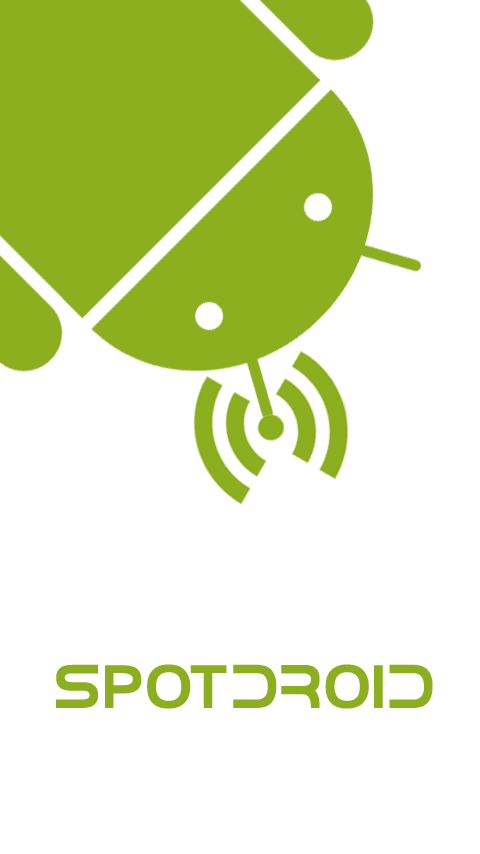
<style>
.page{position:relative;width:480px;height:854px;background:#ffffff}
.page>*{position:absolute;margin:0}
.t1{font:60px "DroidLogo";color:#8caf20}
</style>
<div class="page">
<p class="t1" style="left:56px;top:664px;width:377px;height:45px">SPOTDROID</p>
</div>
